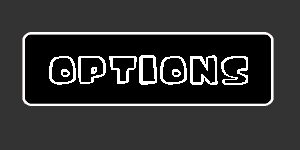
<style>
.page{position:relative;width:300px;height:150px;background:#333333}
.page>*{position:absolute;margin:0}
.t1{font:60px "iceagefont";color:#ffffff}
</style>
<div class="page">
<p class="t1" style="left:49px;top:55px;width:199px;height:30px">Options</p>
</div>
